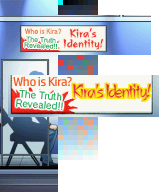
<style>
.page{position:relative;width:168px;height:192px;background:#ffffff}
.page>*{position:absolute;margin:0}
.t1{font:6.5px "RodinProN-M";color:#f08048;font-weight:bold;scale:0.92 1}
.t2{font:11.9px/10.1px "PopFuryStd-B";color:#f03838;scale:0.9 1}
.t3{font:11.9px/10.1px "Tahoma";color:#f03838;scale:0.9 1}
.t4{font:7px/6px "ArialMT";color:#28af5f}
</style>
<div class="page">
<p class="t1" style="left:25px;top:28px;width:37px;height:6px">Who is Kira?</p>
<p class="t2" style="left:63px;top:28px;width:41px;height:22px;text-align:center">Kira<span class="t3">’</span>s<br>Identity!</p>
<p class="t4" style="left:24px;top:36px;width:33px;height:13px;text-align:center;rotate:2deg">The Truth<br>Revealed!!</p>
</div>
